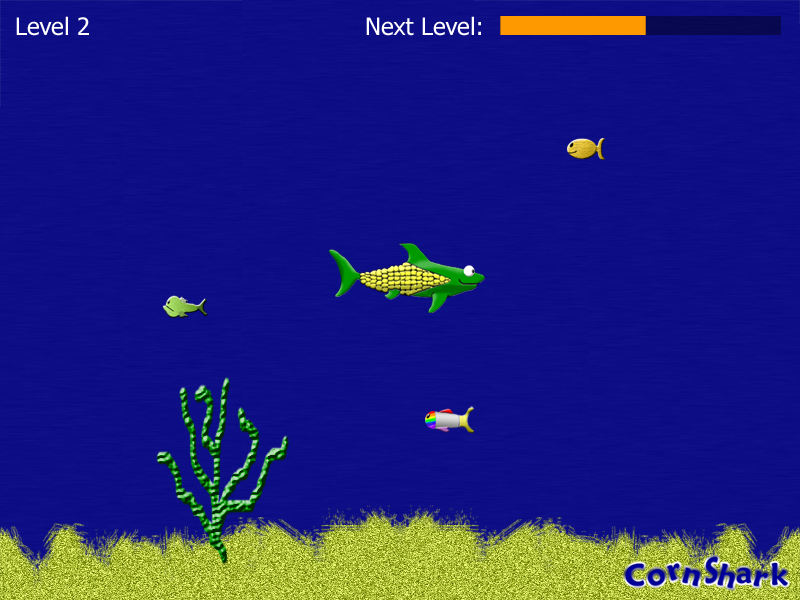
<style>
.page{position:relative;width:800px;height:600px;background:#0d0d85}
.page>*{position:absolute;margin:0}
.t1{font:24px "Tahoma";color:#ffffff}
</style>
<div class="page">
<p class="t1" style="left:16px;top:16px;width:73px;height:20px">Level 2</p>
<p class="t1" style="left:366px;top:16px;width:115px;height:20px">Next Level:</p>
</div>
